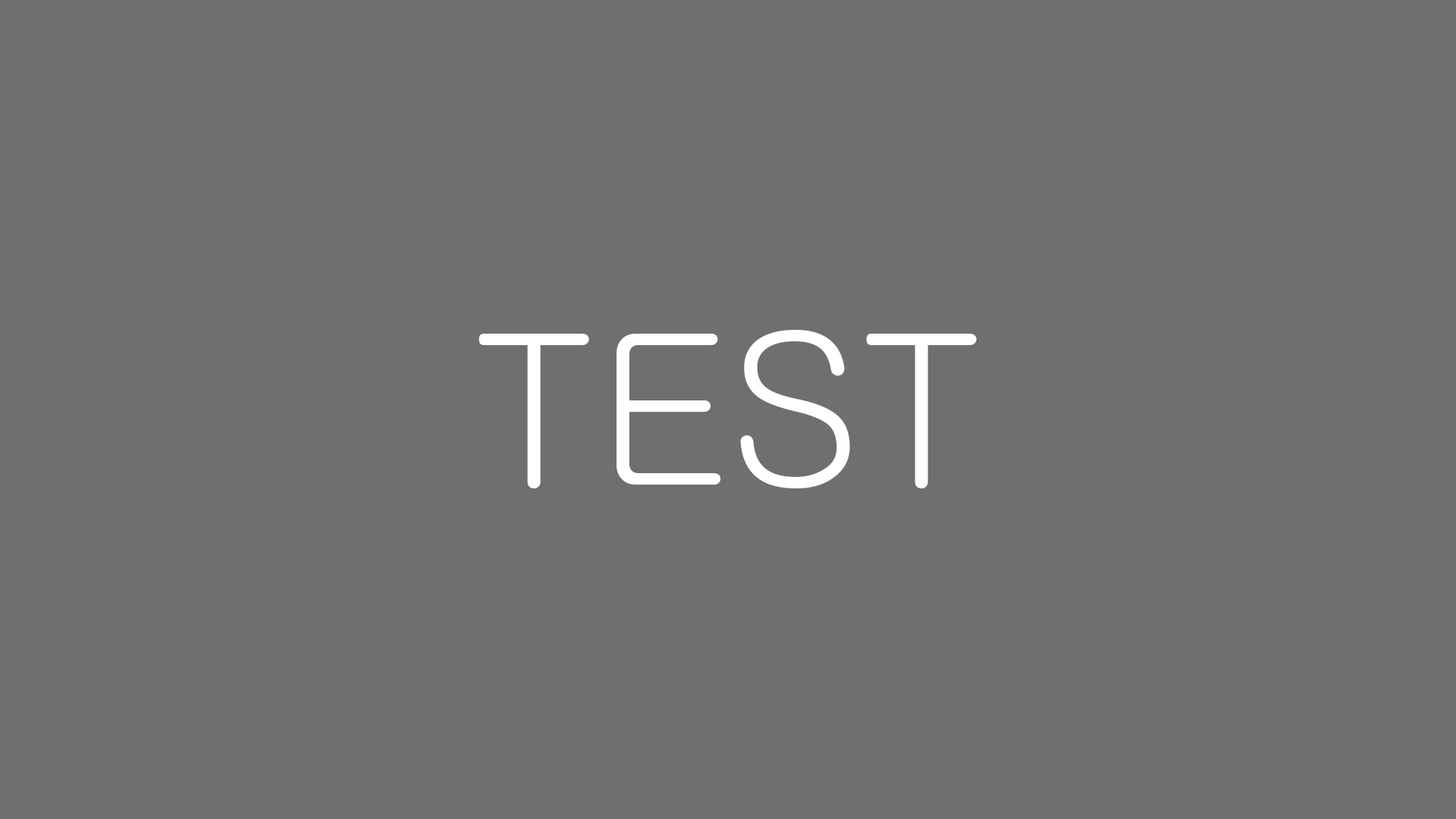
<style>
.page{position:relative;width:1456px;height:819px;background:#6f6f6f}
.page>*{position:absolute;margin:0}
.t1{font:210.6px "Gulim";color:#ffffff}
</style>
<div class="page">
<p class="t1" style="left:479px;top:330px;width:498px;height:158px">TEST</p>
</div>
